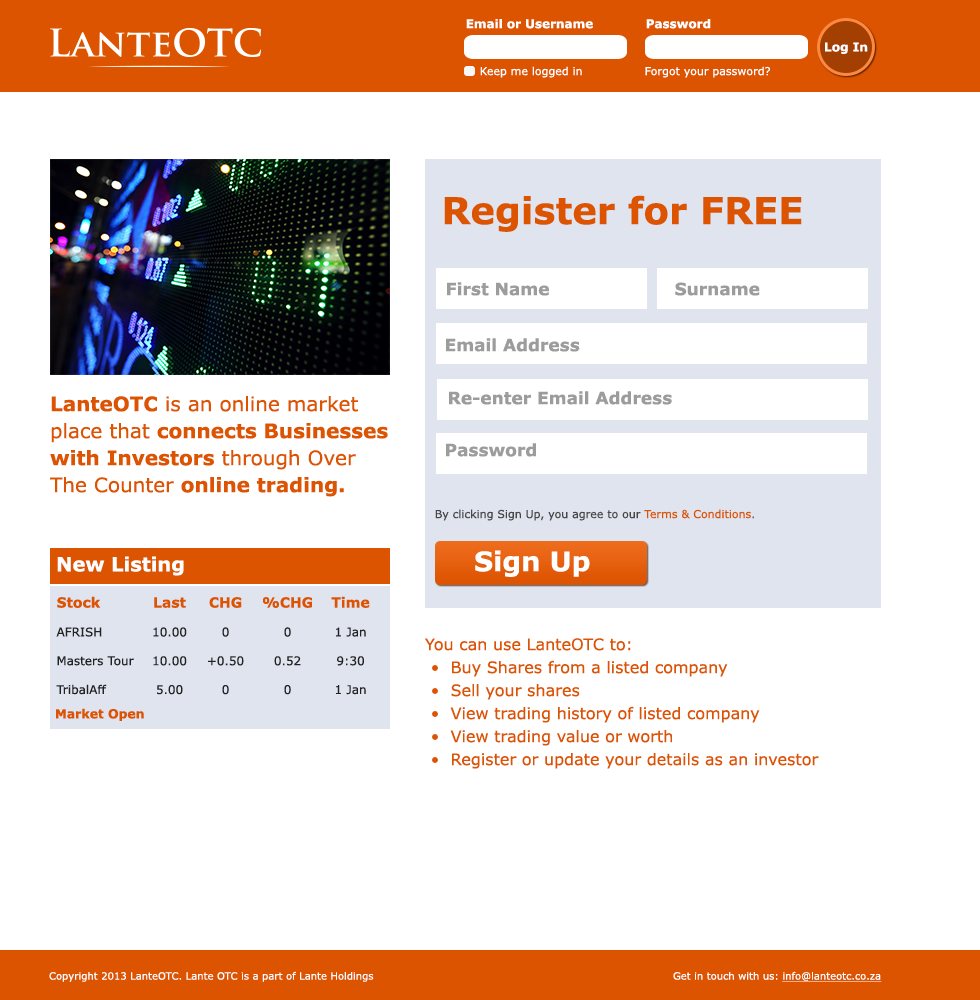
<style>
.page{position:relative;width:980px;height:1000px;background:#ffffff}
.page>*{position:absolute;margin:0}
.t1{font:12px "Verdana-Bold";color:#ffffff}
.t2{font:11px "Verdana";color:#ffffff}
.t3{font:37px "Verdana-Bold";color:#dc5300}
.t4{font:17px "Verdana-Bold";color:#9c9c9c}
.t5{font:20px/27px "Verdana-Bold";color:#dc5300}
.t6{font:20px/27px "Verdana";color:#dc5300}
.t7{font:11px "Verdana";color:#474747}
.t8{font:11px "Verdana";color:#dc5300}
.t9{font:11px "Verdana";color:#5e5e5e}
.t10{font:19.5px "Verdana-Bold";color:#ffffff}
.t11{font:27px "Verdana-Bold";color:#ffffff}
.t12{font:12px "Verdana";color:#222222}
.t13{font:14px "Verdana-Bold";color:#dc5300}
.t14{font:16px/23px "Verdana";color:#dc5300}
.t15{font:12.5px "Verdana-Bold";color:#dc5300}
.t16{font:10px "Verdana";color:#ffffff}
.t17{font:10px "Verdana";color:#ffffff;text-decoration:underline}
</style>
<div class="page">
<p class="t1" style="left:466px;top:19px;width:127px;height:10px">Email or Username</p>
<p class="t1" style="left:646px;top:19px;width:65px;height:10px">Password</p>
<p class="t1" style="left:825px;top:42px;width:43px;height:12px">Log In</p>
<p class="t2" style="left:480px;top:66px;width:102px;height:12px">Keep me logged in</p>
<p class="t2" style="left:645px;top:66px;width:125px;height:12px">Forgot your password?</p>
<p class="t3" style="left:444px;top:195px;width:358px;height:37px">Register for FREE</p>
<p class="t4" style="left:447px;top:282px;width:102px;height:14px">First Name</p>
<p class="t4" style="left:675px;top:282px;width:85px;height:14px">Surname</p>
<p class="t4" style="left:446px;top:338px;width:134px;height:14px">Email Address</p>
<p class="t5" style="left:50px;top:396px;width:338px;height:101px">LanteOTC<span class="t6"> is an online market place that </span>connects Businesses with Investors<span class="t6"> through Over The Counter </span>online trading.</p>
<p class="t4" style="left:449px;top:391px;width:223px;height:14px">Re-enter Email Address</p>
<p class="t4" style="left:446px;top:443px;width:90px;height:14px">Password</p>
<p class="t7" style="left:435px;top:509px;width:319px;height:12px">By clicking Sign Up, you agree to our <span class="t8">Terms &amp; Conditions</span><span class="t9">.</span></p>
<p class="t10" style="left:57px;top:556px;width:127px;height:20px">New Listing</p>
<p class="t11" style="left:475px;top:550px;width:115px;height:27px">Sign Up</p>
<p class="t12" style="left:56px;top:596px;width:78px;height:99px"><span class="t13">Stock<br><br></span>AFRISH<br><br>Masters Tour<br><br>TribalAff</p>
<p class="t12" style="left:153px;top:597px;width:34px;height:98px;text-align:center"><span class="t13">Last<br><br></span>10.00<br><br>10.00<br><br>5.00</p>
<p class="t12" style="left:208px;top:597px;width:36px;height:98px;text-align:center"><span class="t13">CHG<br><br></span>0<br><br>+0.50<br><br>0</p>
<p class="t12" style="left:263px;top:597px;width:49px;height:98px;text-align:center"><span class="t13">%CHG<br><br></span>0<br><br>0.52<br><br>0</p>
<p class="t12" style="left:331px;top:596px;width:39px;height:99px;text-align:center"><span class="t13">Time<br><br></span>1 Jan<br><br>9:30<br><br>1 Jan</p>
<p class="t14" style="left:425px;top:638px;width:394px;height:131px">You can use LanteOTC to: <br> •  Buy Shares from a listed company <br> •  Sell your shares <br> •  View trading history of listed company <br> •  View trading value or worth<br> •  Register or update your details as an investor</p>
<p class="t15" style="left:56px;top:708px;width:88px;height:13px">Market Open</p>
<p class="t16" style="left:49px;top:971px;width:325px;height:11px">Copyright 2013 LanteOTC. Lante OTC is a part of Lante Holdings</p>
<p class="t16" style="left:673px;top:971px;width:209px;height:11px">Get in touch with us: <span class="t17">info@lanteotc.co.za</span></p>
</div>
